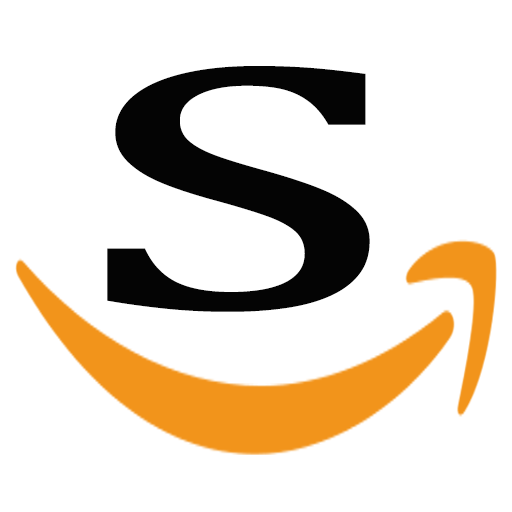
<style>
.page{position:relative;width:512px;height:512px;background:#ffffff}
.page>*{position:absolute;margin:0}
.t1{font:508.8px "CambriaMath";color:#040404;scale:1.54 1}
</style>
<div class="page">
<p class="t1" style="left:107px;top:66px;width:263px;height:246px">s</p>
</div>
